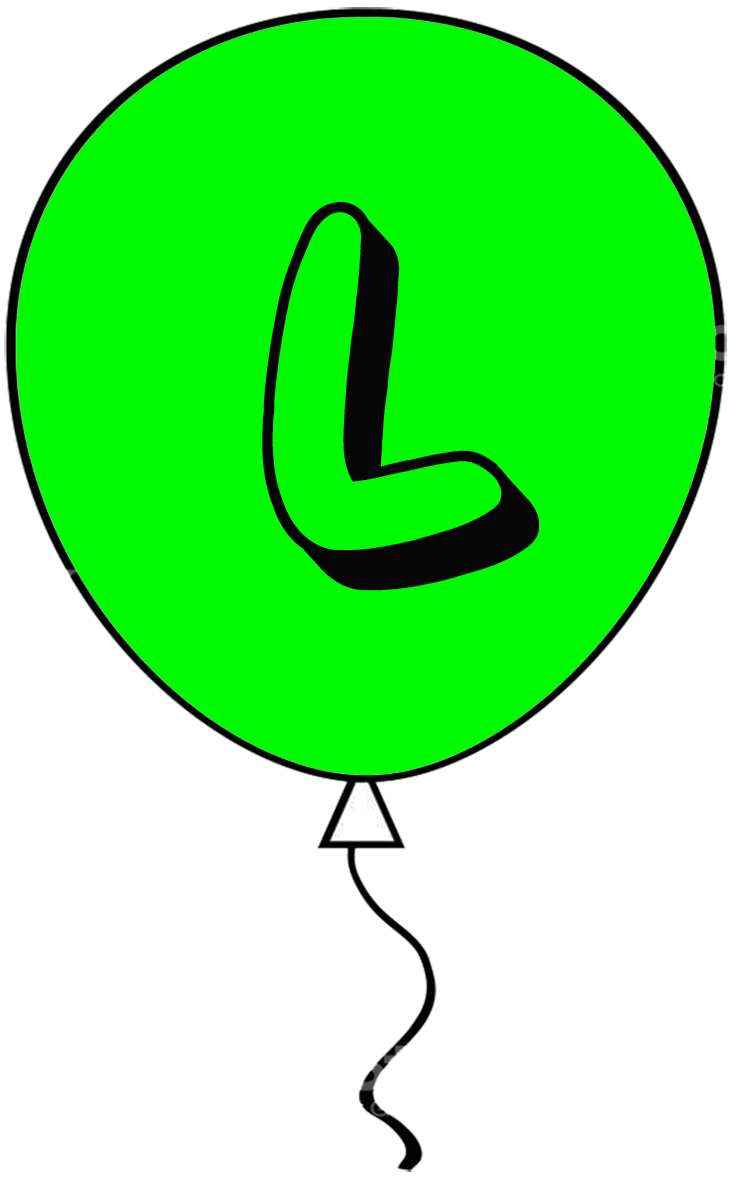
<style>
.page{position:relative;width:742px;height:1179px;background:#ffffff}
.page>*{position:absolute;margin:0}
.t1{font:500px "ActionManShaded";color:#050505}
</style>
<div class="page">
<p class="t1" style="left:262px;top:202px;width:277px;height:389px">L</p>
</div>
